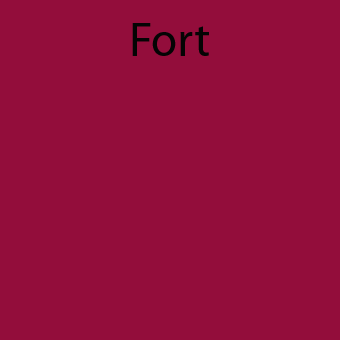
<style>
.page{position:relative;width:340px;height:340px;background:#930d3b}
.page>*{position:absolute;margin:0}
.t1{font:48px "MyriadPro-Regular";color:#040404}
</style>
<div class="page">
<p class="t1" style="left:132px;top:23px;width:77px;height:33px">Fort</p>
</div>
